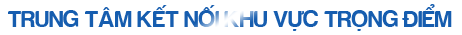
<style>
.page{position:relative;width:462px;height:35px;background:#ffffff}
.page>*{position:absolute;margin:0}
.t1{font:24.4px "FS-Harabara";color:#165daf}
</style>
<div class="page">
<p class="t1" style="left:8px;top:4px;width:444px;height:27px">TRUNG TÂM KẾT NỐI KHU VỰC TRỌNG ĐIỂM</p>
</div>
